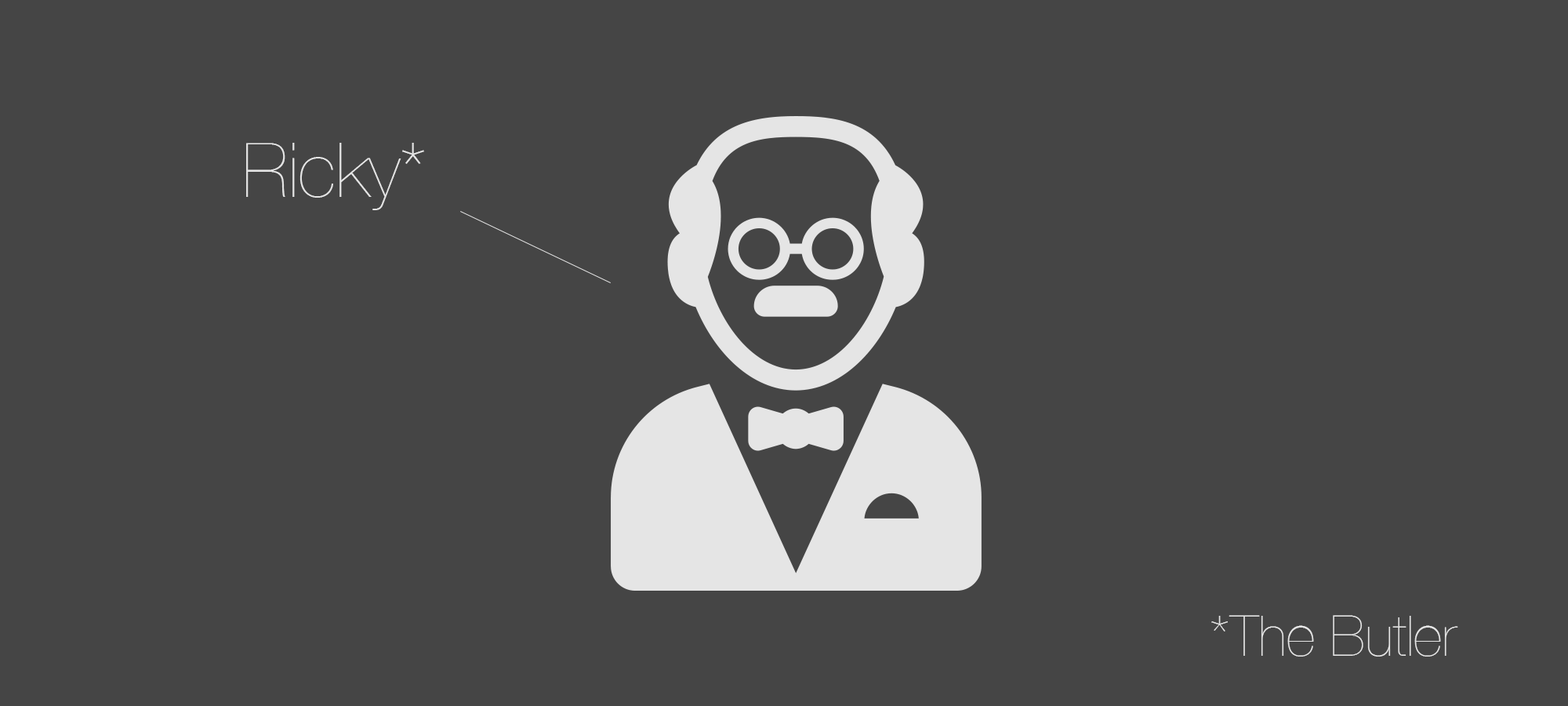
<style>
.page{position:relative;width:1568px;height:706px;background:#454545}
.page>*{position:absolute;margin:0}
.t1{font:75.3px "HelveticaNeue-UltraLight";color:#e5e5e5}
.t2{font:56.4px "HelveticaNeue-UltraLight";color:#e5e5e5}
</style>
<div class="page">
<p class="t1" style="left:246px;top:143px;width:178px;height:67px">Ricky*</p>
<p class="t2" style="left:1211px;top:615px;width:247px;height:41px">*The Butler</p>
</div>
